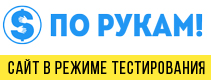
<style>
.page{position:relative;width:211px;height:80px;background:#ffffff}
.page>*{position:absolute;margin:0}
.t1{font:18px "BebasNeueRegular";letter-spacing:0.05em;color:#020200}
</style>
<div class="page">
<p class="t1" style="left:8px;top:59px;width:197px;height:16px">Сайт в режиме тестирования</p>
</div>
